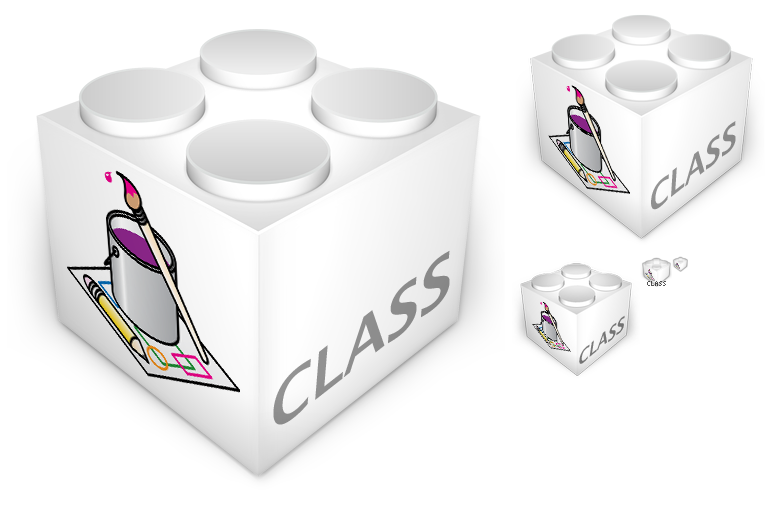
<style>
.page{position:relative;width:768px;height:512px;background:#ffffff}
.page>*{position:absolute;margin:0}
.t1{font:36.8px "LucidaGrande-Bold";color:#959595;scale:0.95 1}
.t2{font:66.8px "LucidaGrande-Bold";color:#959595;scale:1.09 1}
.t3{font:7px "KKFixed4x7";color:#555555}
.t4{font:20.5px "LucidaGrande-Bold";color:#7d7d7d;scale:0.92 1}
</style>
<div class="page">
<p class="t1" style="left:651px;top:121px;width:85px;height:89px;rotate:-38deg">CLASS</p>
<p class="t2" style="left:273px;top:250px;width:177px;height:175px;rotate:-38deg">CLASS</p>
<p class="t3" style="left:647px;top:281px;width:19px;height:5px">CLASS</p>
<p class="t4" style="left:579px;top:315px;width:46px;height:49px;rotate:-39deg">CLASS</p>
</div>
